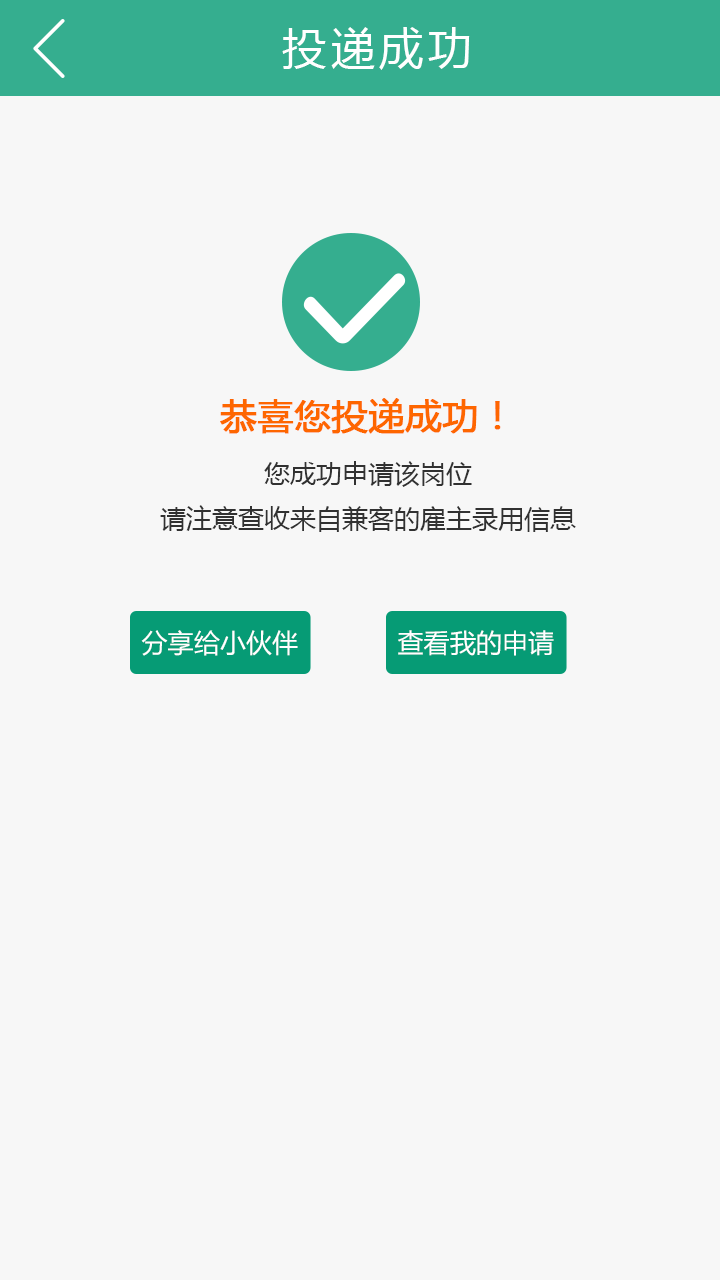
<style>
.page{position:relative;width:720px;height:1280px;background:#f7f7f7}
.page>*{position:absolute;margin:0}
.t1{font:44px "MicrosoftYaHei";letter-spacing:0.1em;color:#ffffff}
.t2{font:26px "MicrosoftYaHei";color:#313131}
.t3{font:36px "MicrosoftYaHei";color:#fe6600;font-weight:bold}
.t4{font:26px "MicrosoftYaHei";color:#ffffff}
</style>
<div class="page">
<p class="t1" style="left:282px;top:27px;width:188px;height:43px">投递成功</p>
<p class="t2" style="left:160px;top:398px;width:416px;height:134px;text-align:center"><span class="t3">恭喜您投递成功！<br></span>您成功申请该岗位<br>请注意查收来自兼客的雇主录用信息</p>
<p class="t4" style="left:141px;top:630px;width:157px;height:26px">分享给小伙伴</p>
<p class="t4" style="left:398px;top:630px;width:156px;height:26px">查看我的申请</p>
</div>
